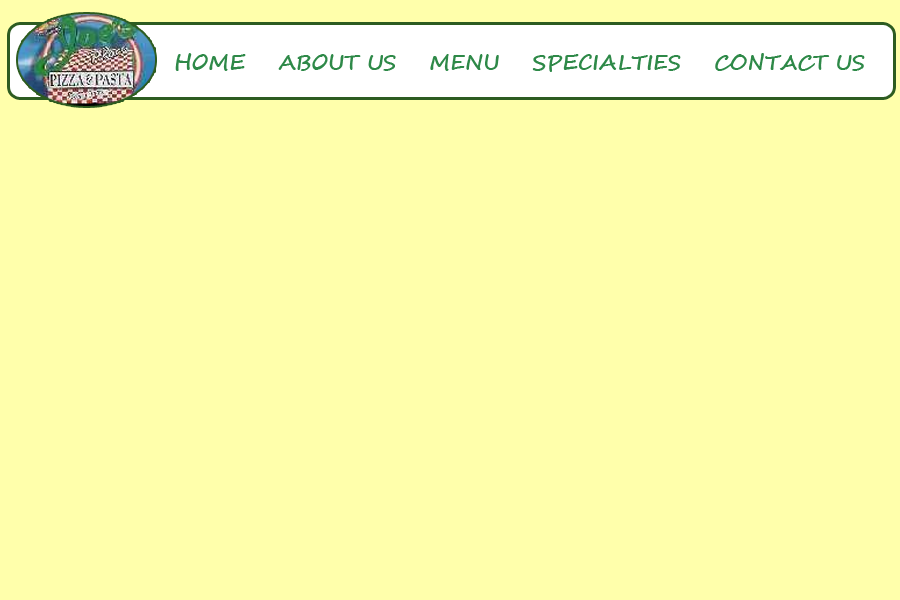
<style>
.page{position:relative;width:900px;height:600px;background:#ffffab}
.page>*{position:absolute;margin:0}
.t1{font:20.8px "SegoeScript-Bold";color:#2e8948}
</style>
<div class="page">
<p class="t1" style="left:175px;top:53px;width:690px;height:19px">HOME    ABOUT US    MENU    SPECIALTIES    CONTACT US</p>
</div>
